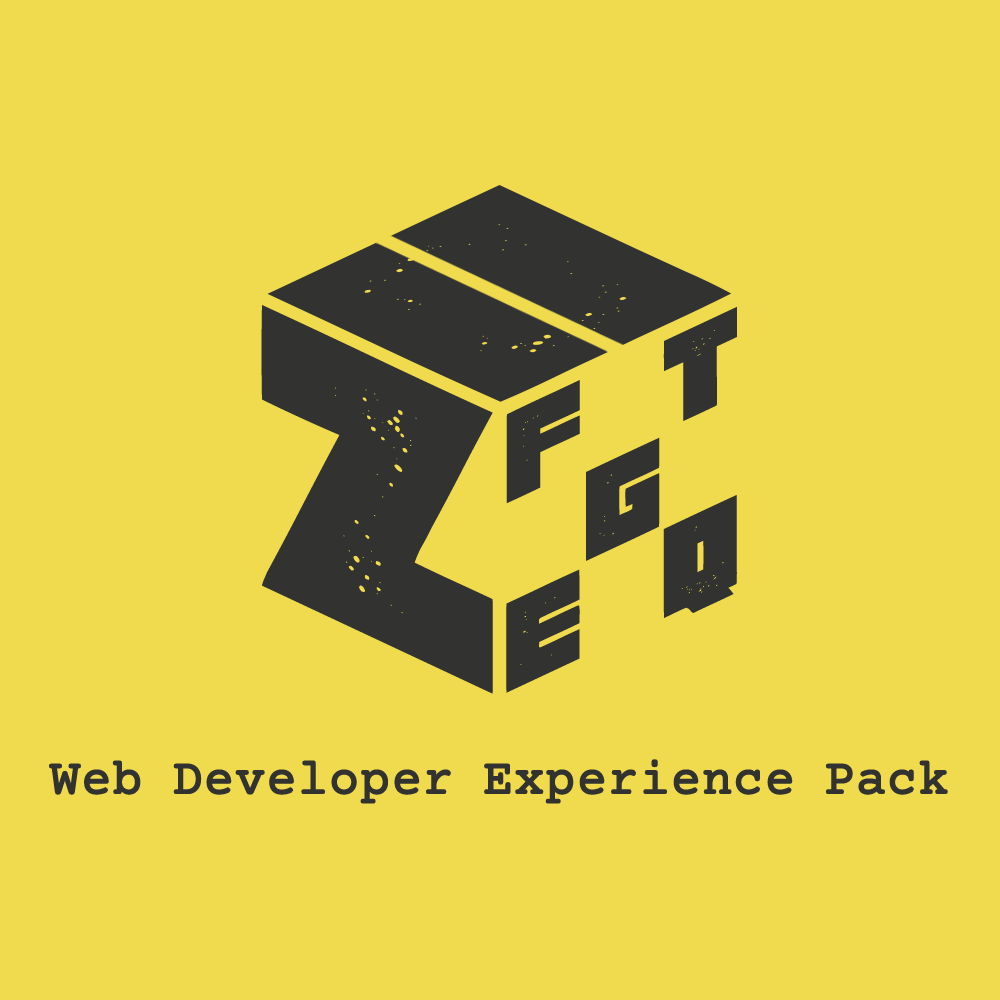
<style>
.page{position:relative;width:1000px;height:1000px;background:#f0db4f}
.page>*{position:absolute;margin:0}
.t1{font:402.9px "ManiacGrunged-Regular";color:#323330;scale:1.24 1}
.t2{font:127.5px "ManiacGrunged-Regular";color:#323330;scale:1.23 1}
.t3{font:50px "CourierPrime-Regular";color:#2e2e2e;font-weight:bold}
</style>
<div class="page">
<p class="t1" style="left:261px;top:305px;width:232px;height:389px;rotate:25deg">z</p>
<p class="t2" style="left:663px;top:306px;width:74px;height:115px;rotate:-25deg">t</p>
<p class="t2" style="left:506px;top:380px;width:74px;height:124px;rotate:-25deg">f</p>
<p class="t2" style="left:586px;top:437px;width:74px;height:124px;rotate:-25deg">g</p>
<p class="t2" style="left:663px;top:495px;width:74px;height:123px;rotate:-25deg">q</p>
<p class="t2" style="left:506px;top:569px;width:74px;height:124px;rotate:-25deg">e</p>
<p class="t3" style="left:49px;top:759px;width:899px;height:45px">Web Developer Experience Pack</p>
</div>
